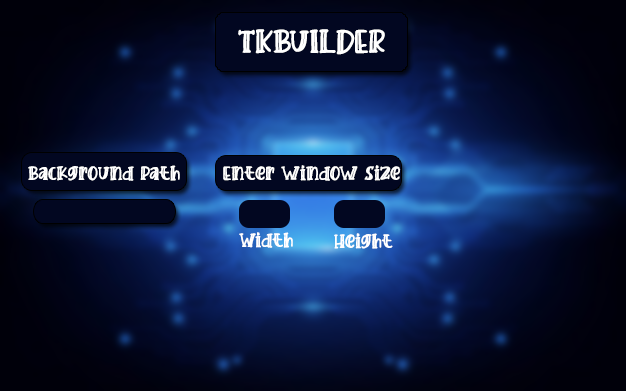
<style>
.page{position:relative;width:626px;height:391px}
.page>*{position:absolute;margin:0}
.t1{font:48px "CrafterRegular";color:#ffffff}
.t2{font:28px "CrafterRegular";color:#ffffff}
</style>
<div class="page">
<p class="t1" style="left:238px;top:29px;width:147px;height:26px">TKBuILDER</p>
<p class="t2" style="left:28px;top:165px;width:152px;height:16px">Background Path</p>
<p class="t2" style="left:223px;top:165px;width:178px;height:16px">Enter window size</p>
<p class="t2" style="left:239px;top:232px;width:54px;height:16px">Width</p>
<p class="t2" style="left:334px;top:233px;width:59px;height:16px">Height</p>
</div>
